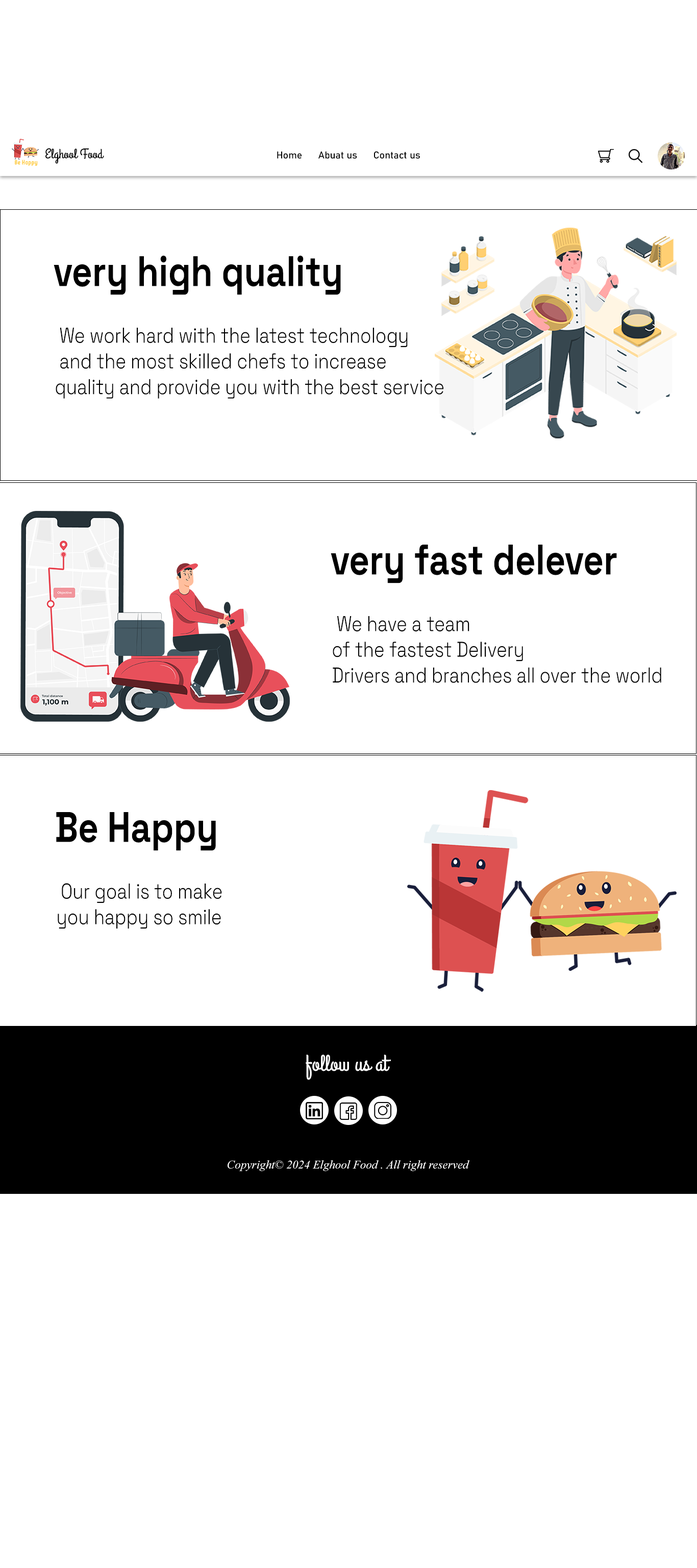
<style>
.page{position:relative;width:697px;height:1568px;background:#ffffff}
.page>*{position:absolute;margin:0}
.t1{font:13.7px "GrandHotel-Regular";color:#000000}
.t2{font:9.9px "Bahnschrift";color:#000000}
.t3{font:42.7px "SpaceGrotesk-Bold";color:#000000;scale:0.83 1}
.t4{font:21.4px "SpaceGrotesk-Light";color:#000000;scale:0.83 1}
.t5{font:22.8px "GrandHotel-Regular";color:#ffffff}
.t6{font:11.7px "TimesNewRomanPS-ItalicMT";color:#ffffff}
</style>
<div class="page">
<p class="t1" style="left:45px;top:148px;width:59px;height:16px">Elghool Food</p>
<p class="t2" style="left:277px;top:151px;width:143px;height:8px">Home      Abuat us      Contact us</p>
<p class="t3" style="left:54px;top:255px;width:287px;height:40px">very high quality</p>
<p class="t4" style="left:56px;top:328px;width:388px;height:71px;text-align:right">We work hard with the latest technology <br>and the most skilled chefs to increase <br>quality and provide you with the best service</p>
<p class="t3" style="left:331px;top:545px;width:286px;height:38px">very fast delever</p>
<p class="t4" style="left:333px;top:616px;width:329px;height:67px;text-align:right">We have a team <br>of the fastest Delivery<br> Drivers and branches all over the world</p>
<p class="t3" style="left:56px;top:812px;width:160px;height:39px">Be Happy</p>
<p class="t4" style="left:58px;top:883px;width:164px;height:46px;text-align:right">Our goal is to make <br>you happy so smile</p>
<p class="t5" style="left:306px;top:1055px;width:85px;height:25px">follow us at</p>
<p class="t6" style="left:228px;top:1160px;width:242px;height:11px">Copyright© 2024 Elghool Food . All right reserved</p>
</div>
